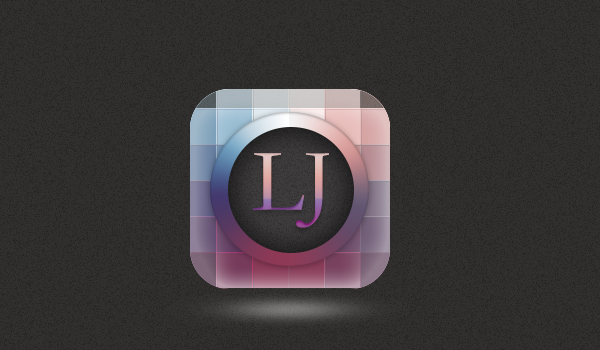
<style>
.page{position:relative;width:600px;height:350px;background:#31302e}
.page>*{position:absolute;margin:0}
.t1{font:90px "STSongti-SC-Regular"}
</style>
<div class="page">
<p class="t1" style="left:253px;top:153px;width:76px;height:75px">LJ</p>
</div>
